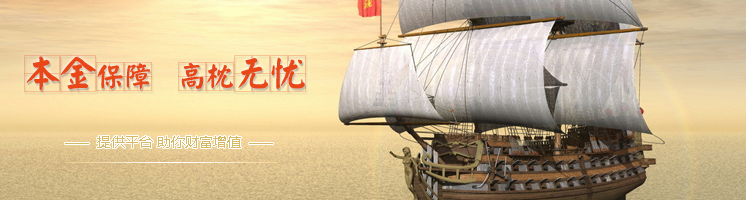
<style>
.page{position:relative;width:746px;height:200px}
.page>*{position:absolute;margin:0}
.t1{font:28px "YankaigungEG-Ultra-GB";color:#e94718}
.t2{font:36px "YankaigungEG-Ultra-GB";color:#e94718}
.t3{font:14px "MicrosoftYaHei";color:#d5b965}
.t4{font:12px "ArialMT";color:#d5b965}
</style>
<div class="page">
<p class="t1" style="left:24px;top:55px;width:282px;height:37px"><span class="t2">本金</span>保障  高枕<span class="t2">无忧</span></p>
<p class="t3" style="left:97px;top:136px;width:144px;height:12px">提供平台 助你财富增值</p>
<p class="t4" style="left:64px;top:143px;width:26px;height:1px">——</p>
<p class="t4" style="left:248px;top:143px;width:26px;height:1px">——</p>
</div>
